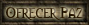
<style>
.page{position:relative;width:89px;height:25px}
.page>*{position:absolute;margin:0}
.t1{font:15px "Morpheus"}
</style>
<div class="page">
<p class="t1" style="left:6px;top:7px;width:78px;height:13px">Ofrecer Paz</p>
</div>
